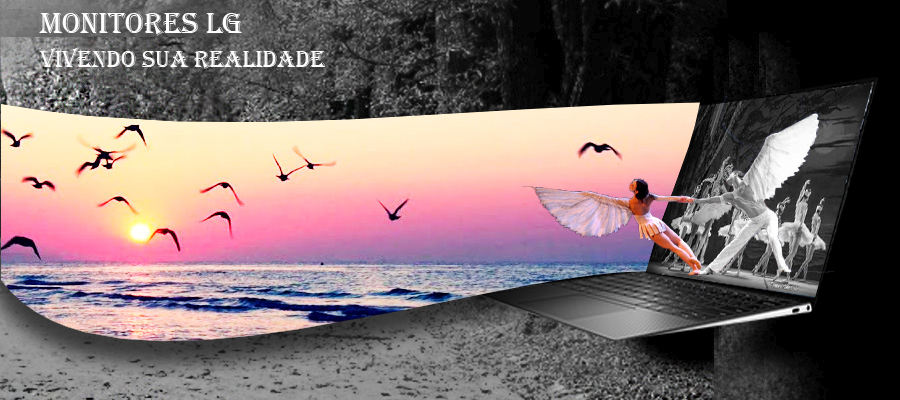
<style>
.page{position:relative;width:900px;height:400px}
.page>*{position:absolute;margin:0}
.t1{font:30px "Algerian";color:#fefefe}
.t2{font:24px "Algerian";color:#fdfdfd}
</style>
<div class="page">
<p class="t1" style="left:39px;top:13px;width:203px;height:23px">monitores LG</p>
<p class="t2" style="left:39px;top:47px;width:287px;height:22px">vivendo sua realidade</p>
</div>
